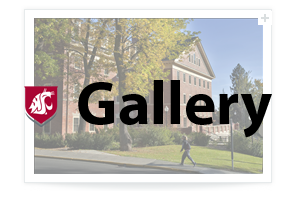
<style>
.page{position:relative;width:297px;height:201px;background:#ffffff}
.page>*{position:absolute;margin:0}
.t1{font:60.9px "MyriadPro-Bold";color:#000000}
</style>
<div class="page">
<p class="t1" style="left:78px;top:80px;width:194px;height:58px">Gallery</p>
</div>
